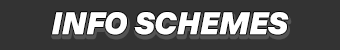
<style>
.page{position:relative;width:340px;height:50px;background:#333333}
.page>*{position:absolute;margin:0}
.t1{font:31.6px "TTInterphasesProTrl-BlkIt";color:#ffffff}
</style>
<div class="page">
<p class="t1" style="left:52px;top:12px;width:237px;height:23px">INFO SCHEMES</p>
</div>
